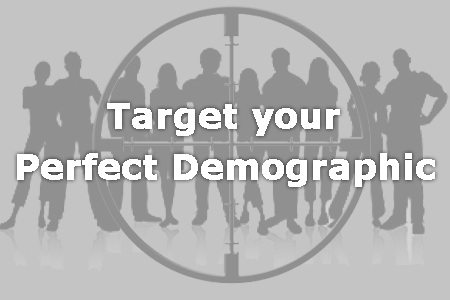
<style>
.page{position:relative;width:450px;height:300px;background:#c4c4c4}
.page>*{position:absolute;margin:0}
.t1{font:34px "Verdana-Bold";color:#ffffff;font-weight:bold}
</style>
<div class="page">
<p class="t1" style="left:107px;top:103px;width:233px;height:33px">Target your</p>
<p class="t1" style="left:17px;top:153px;width:418px;height:34px">Perfect Demographic</p>
</div>
